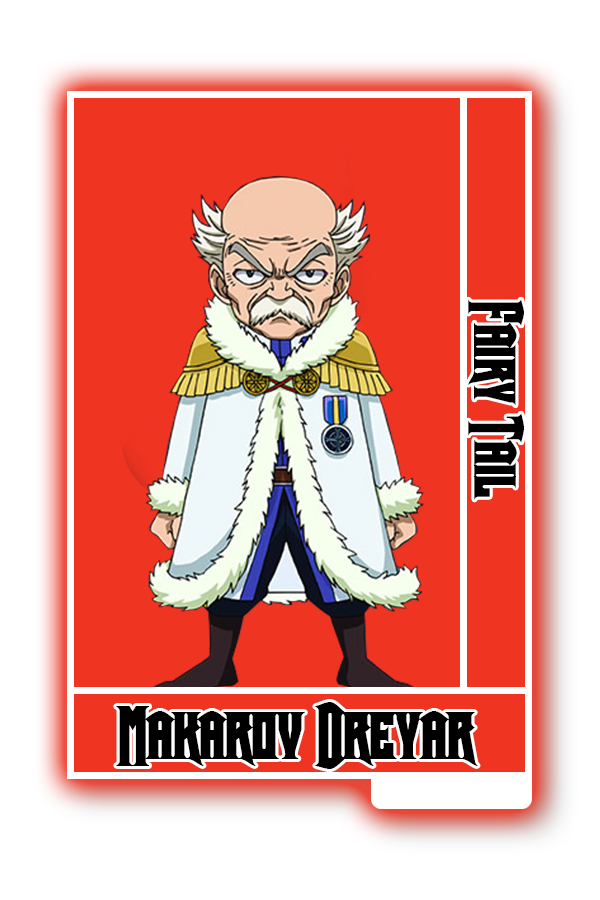
<style>
.page{position:relative;width:600px;height:900px;background:#ef3422}
.page>*{position:absolute;margin:0}
.t1{font:61.5px "Crown-Title";color:#000000}
.t2{font:70.1px "Crown-Title";color:#000000}
</style>
<div class="page">
<p class="t1" style="left:468px;top:299px;width:56px;height:201px;rotate:90deg">Fairy Tail</p>
<p class="t2" style="left:116px;top:702px;width:362px;height:67px">Makarov Dreyar</p>
</div>
